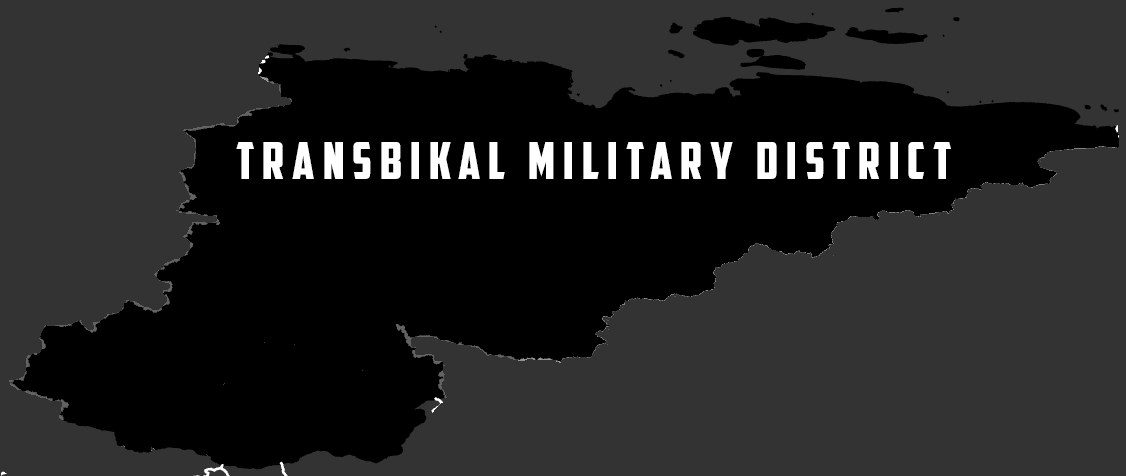
<style>
.page{position:relative;width:1126px;height:476px;background:#333333}
.page>*{position:absolute;margin:0}
.t1{font:51px "AmericanCaptain";letter-spacing:0.16em;color:#ffffff}
</style>
<div class="page">
<p class="t1" style="left:236px;top:142px;width:715px;height:37px">transbikal military district</p>
</div>
